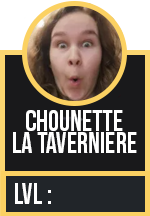
<style>
.page{position:relative;width:150px;height:216px;background:#19191b}
.page>*{position:absolute;margin:0}
.t1{font:29px/22px "BebasNeue-Regular";color:#ffffff;scale:0.96 1}
.t2{font:29px "BebasNeue-Regular";color:#ffffff;scale:0.96 1}
</style>
<div class="page">
<p class="t1" style="left:13px;top:110px;width:124px;height:43px;text-align:center">Chounette<br>la taverniere</p>
<p class="t2" style="left:15px;top:183px;width:36px;height:21px">lvl :</p>
</div>
